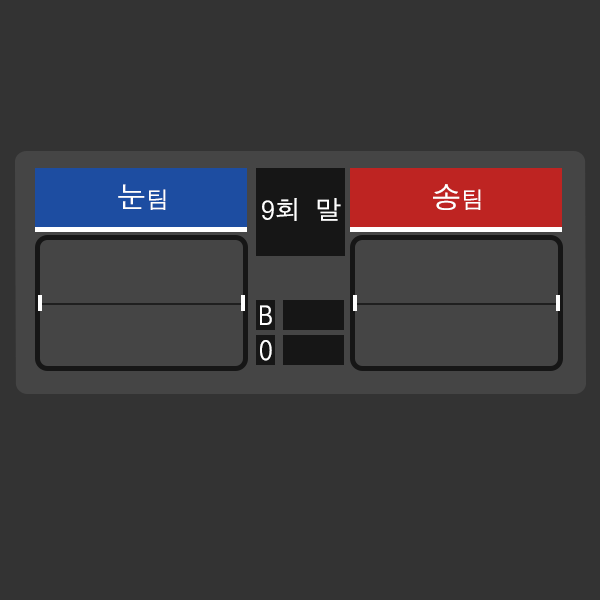
<style>
.page{position:relative;width:600px;height:600px;background:#333333}
.page>*{position:absolute;margin:0}
.t1{font:30px "DotumChe";color:#ffffff}
.t2{font:23.3px "DotumChe";color:#ffffff}
.t3{font:26.7px "DotumChe";color:#ffffff}
</style>
<div class="page">
<p class="t1" style="left:118px;top:184px;width:48px;height:26px">눈<span class="t2">팀</span></p>
<p class="t1" style="left:433px;top:184px;width:48px;height:26px">송<span class="t2">팀</span></p>
<p class="t3" style="left:262px;top:198px;width:79px;height:23px">9회 말</p>
<p class="t3" style="left:260px;top:305px;width:12px;height:20px">B</p>
<p class="t3" style="left:260px;top:340px;width:12px;height:21px">O</p>
</div>
